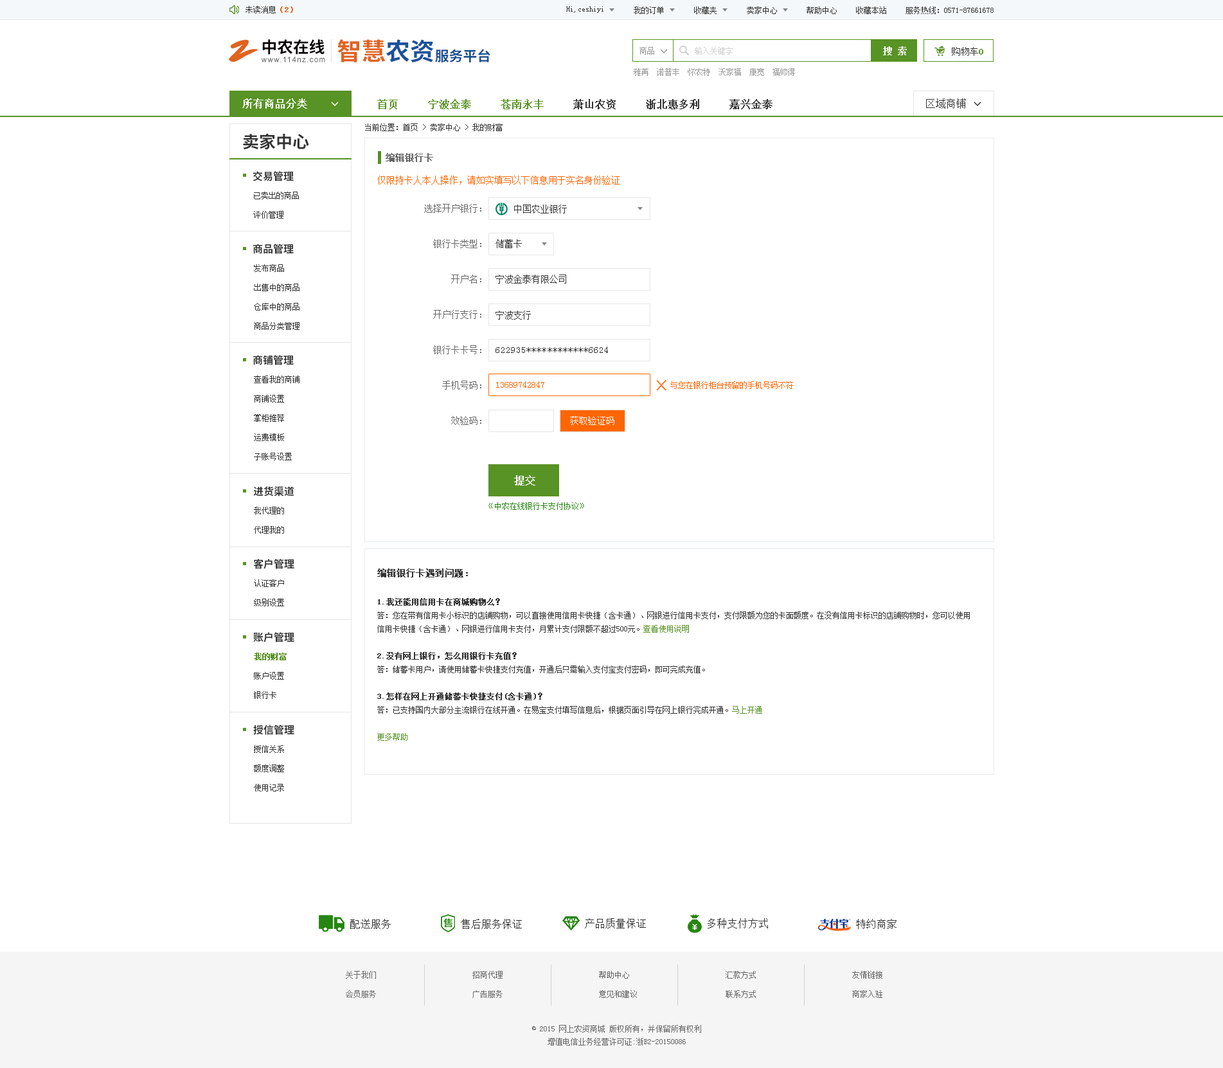
<style>
.page{position:relative;width:1223px;height:1068px;background:#ffffff}
.page>*{position:absolute;margin:0}
.t1{font:7.7px "SimSun";color:#333333}
.t2{font:7.7px "SimSun";color:#e0631f;font-weight:bold}
.t3{font:32.6px "SmudgerLetPlain";color:#e0631f}
.t4{font:15.9px "SourceHanSansCN-Bold";color:#060001}
.t5{font:24.3px "SourceHanSansCN-Bold";color:#e0631f}
.t6{font:24.3px "SourceHanSansCN-Bold";color:#1a529c}
.t7{font:14px "SourceHanSansCN-Bold";color:#194f93}
.t8{font:7.7px "SimSun";color:#999999}
.t9{font:7.7px "SimSun";color:#d1d1d1}
.t10{font:9px "SimSun";color:#ffffff;font-weight:bold}
.t11{font:9px "SimSun";color:#333333}
.t12{font:9px "SimSun";color:#589325;font-weight:bold}
.t13{font:7.6px "ArialMT";letter-spacing:0.1em;color:#585859}
.t14{font:10.3px "SimSun";color:#ffffff;font-weight:bold}
.t15{font:10.3px "SimSun";color:#333333;font-weight:bold}
.t16{font:10.3px "SimSun";color:#589325;font-weight:bold}
.t17{font:10.3px "SimSun";color:#333333}
.t18{font:16.7px "SourceHanSansCN-Bold";color:#333333}
.t19{font:9px "SimSun";color:#666666;font-weight:bold}
.t20{font:10.3px "SourceHanSansCN-Bold";color:#333333}
.t21{font:9px "SimSun";color:#ff6600}
.t22{font:7.7px/19.3px "SimSun";color:#333333}
.t23{font:9px "SimSun";color:#666666}
.t24{font:9px "SimSun";letter-spacing:0.075em;color:#333333}
.t25{font:7.7px "SimSun";color:#ff6600}
.t26{font:9px "SimSun";color:#ffffff}
.t27{font:7.7px "SimSun";color:#268611}
.t28{font:9px "SimSun";color:#333333;font-weight:bold}
.t29{font:7.7px "SimSun";color:#333333;font-weight:bold}
.t30{font:7.7px "SimSun";color:#589325}
.t31{font:7.7px/19.3px "SimSun";color:#589325;font-weight:bold}
.t32{font:7.7px/19.3px "SimSun";color:#666666}
.t33{font:7.7px/12.9px "SimSun";color:#666666}
</style>
<div class="page">
<p class="t1" style="left:246px;top:6px;width:47px;height:8px">未读消息<span class="t2">（2）</span></p>
<p class="t1" style="left:566px;top:6px;width:38px;height:7px">Hi,ceshiyi</p>
<p class="t1" style="left:634px;top:6px;width:30px;height:8px">我的订单</p>
<p class="t1" style="left:694px;top:6px;width:23px;height:8px">收藏夹</p>
<p class="t1" style="left:747px;top:6px;width:30px;height:8px">卖家中心</p>
<p class="t1" style="left:807px;top:6px;width:30px;height:8px">帮助中心</p>
<p class="t1" style="left:856px;top:6px;width:31px;height:8px">收藏本站</p>
<p class="t1" style="left:906px;top:6px;width:88px;height:8px">服务热线：0571-87661678</p>
<p class="t3" style="left:229px;top:39px;width:29px;height:23px">Z</p>
<p class="t4" style="left:262px;top:39px;width:63px;height:16px">中农在线</p>
<p class="t5" style="left:338px;top:39px;width:96px;height:23px">智慧<span class="t6">农资</span></p>
<p class="t7" style="left:435px;top:49px;width:56px;height:13px">服务平台</p>
<p class="t8" style="left:640px;top:47px;width:14px;height:8px">商品</p>
<p class="t9" style="left:695px;top:47px;width:38px;height:8px">输入关键字</p>
<p class="t10" style="left:883px;top:46px;width:24px;height:9px">搜 索</p>
<p class="t11" style="left:952px;top:47px;width:32px;height:9px">购物车<span class="t12">0</span></p>
<p class="t13" style="left:261px;top:57px;width:64px;height:5px">www.114nz.com</p>
<p class="t8" style="left:634px;top:68px;width:161px;height:8px">雅苒  诺普丰  怀农特  沃家福  康宽  福帅得</p>
<p class="t14" style="left:242px;top:98px;width:65px;height:11px">所有商品分类</p>
<p class="t15" style="left:377px;top:99px;width:396px;height:10px"><span class="t16">首页     宁波金泰     苍南永丰    </span> 萧山农资     浙北惠多利     嘉兴金泰</p>
<p class="t17" style="left:926px;top:98px;width:40px;height:11px">区域商铺</p>
<p class="t1" style="left:365px;top:123px;width:138px;height:8px">当前位置：首页 &gt; 卖家中心 &gt; 我的财富</p>
<p class="t18" style="left:243px;top:133px;width:66px;height:17px">卖家中心</p>
<p class="t19" style="left:386px;top:153px;width:47px;height:9px">编辑银行卡</p>
<p class="t20" style="left:253px;top:171px;width:41px;height:10px">交易管理</p>
<p class="t21" style="left:377px;top:176px;width:243px;height:8px">仅限持卡人本人操作，请如实填写以下信息用于实名身份验证</p>
<p class="t22" style="left:253px;top:192px;width:46px;height:27px">已卖出的商品<br>评价管理</p>
<p class="t23" style="left:424px;top:204px;width:58px;height:9px">选择开户银行：</p>
<p class="t11" style="left:514px;top:204px;width:53px;height:9px">中国农业银行</p>
<p class="t20" style="left:253px;top:244px;width:41px;height:10px">商品管理</p>
<p class="t23" style="left:433px;top:239px;width:49px;height:9px">银行卡类型：</p>
<p class="t11" style="left:496px;top:239px;width:26px;height:9px">储蓄卡</p>
<p class="t22" style="left:254px;top:264px;width:46px;height:66px">发布商品<br>出售中的商品<br>仓库中的商品<br>商品分类管理</p>
<p class="t23" style="left:451px;top:274px;width:31px;height:10px">开户名：</p>
<p class="t11" style="left:496px;top:274px;width:70px;height:10px">宁波金泰有限公司</p>
<p class="t23" style="left:433px;top:310px;width:49px;height:9px">开户行支行：</p>
<p class="t11" style="left:496px;top:310px;width:35px;height:10px">宁波支行</p>
<p class="t23" style="left:433px;top:345px;width:49px;height:9px">银行卡卡号：</p>
<p class="t24" style="left:496px;top:346px;width:112px;height:7px">622935************6624</p>
<p class="t20" style="left:253px;top:355px;width:41px;height:10px">商铺管理</p>
<p class="t22" style="left:254px;top:375px;width:46px;height:85px">查看我的商铺<br>商铺设置<br>掌柜推荐<br>运费模板<br>子账号设置</p>
<p class="t23" style="left:442px;top:381px;width:40px;height:9px">手机号码：</p>
<p class="t21" style="left:496px;top:381px;width:48px;height:7px">13689742847</p>
<p class="t25" style="left:670px;top:381px;width:123px;height:8px">与您在银行柜台预留的手机号码不符</p>
<p class="t23" style="left:451px;top:416px;width:31px;height:9px">效验码：</p>
<p class="t26" style="left:570px;top:416px;width:45px;height:9px">获取验证码</p>
<p class="t14" style="left:514px;top:475px;width:22px;height:10px">提交</p>
<p class="t20" style="left:253px;top:486px;width:41px;height:10px">进货渠道</p>
<p class="t22" style="left:254px;top:507px;width:30px;height:27px">我代理的<br>代理我的</p>
<p class="t27" style="left:489px;top:502px;width:95px;height:8px">《中农在线银行卡支付协议》</p>
<p class="t20" style="left:253px;top:559px;width:41px;height:10px">客户管理</p>
<p class="t1" style="left:377px;top:568px;width:593px;height:173px"><span class="t28">编辑银行卡遇到问题：<br><br></span><span class="t29">1.我还能用信用卡在商城购物么？<br></span>答：您在带有信用卡小标识的店铺购物，可以直接使用信用卡快捷（含卡通）、网银进行信用卡支付，支付限额为您的卡面额度。在没有信用卡标识的店铺购物时，您可以使用<br>信用卡快捷（含卡通）、网银进行信用卡支付，月累计支付限额不超过500元。<span class="t30">查看使用说明<br><br></span><span class="t29">2.没有网上银行，怎么用银行卡充值？<br></span>答：储蓄卡用户，请使用储蓄卡快捷支付充值，开通后只需输入支付宝支付密码，即可完成充值。<br><br><span class="t29">3.怎样在网上开通储蓄卡快捷支付(含卡通)？<br></span>答：已支持国内大部分主流银行在线开通。在易宝支付填写信息后，根据页面引导在网上银行完成开通。<span class="t30">马上开通<br><br>更多帮助</span></p>
<p class="t22" style="left:254px;top:579px;width:30px;height:27px">认证客户<br>级别设置</p>
<p class="t20" style="left:253px;top:632px;width:41px;height:10px">账户管理</p>
<p class="t22" style="left:254px;top:652px;width:33px;height:47px"><span class="t31">我的财富<br></span>账户设置<br>银行卡</p>
<p class="t20" style="left:253px;top:724px;width:41px;height:11px">授信管理</p>
<p class="t22" style="left:254px;top:745px;width:30px;height:46px">授信关系<br>额度调整<br>使用记录</p>
<p class="t17" style="left:350px;top:919px;width:41px;height:10px">配送服务</p>
<p class="t17" style="left:461px;top:919px;width:61px;height:10px">售后服务保证</p>
<p class="t17" style="left:585px;top:918px;width:61px;height:10px">产品质量保证</p>
<p class="t17" style="left:708px;top:918px;width:60px;height:10px">多种支付方式</p>
<p class="t17" style="left:856px;top:919px;width:41px;height:10px">特约商家</p>
<p class="t32" style="left:346px;top:971px;width:30px;height:27px">关于我们<br>会员服务</p>
<p class="t32" style="left:473px;top:971px;width:30px;height:27px">招商代理<br>广告服务</p>
<p class="t32" style="left:599px;top:971px;width:38px;height:27px">帮助中心<br>意见和建议</p>
<p class="t32" style="left:726px;top:971px;width:30px;height:27px">汇款方式<br>联系方式</p>
<p class="t32" style="left:852px;top:971px;width:31px;height:27px">友情链接<br>商家入驻</p>
<p class="t33" style="left:532px;top:1025px;width:169px;height:20px;text-align:center">© 2015 网上农资商城 版权所有，并保留所有权利<br>增值电信业务经营许可证:浙B2-20150086</p>
</div>
